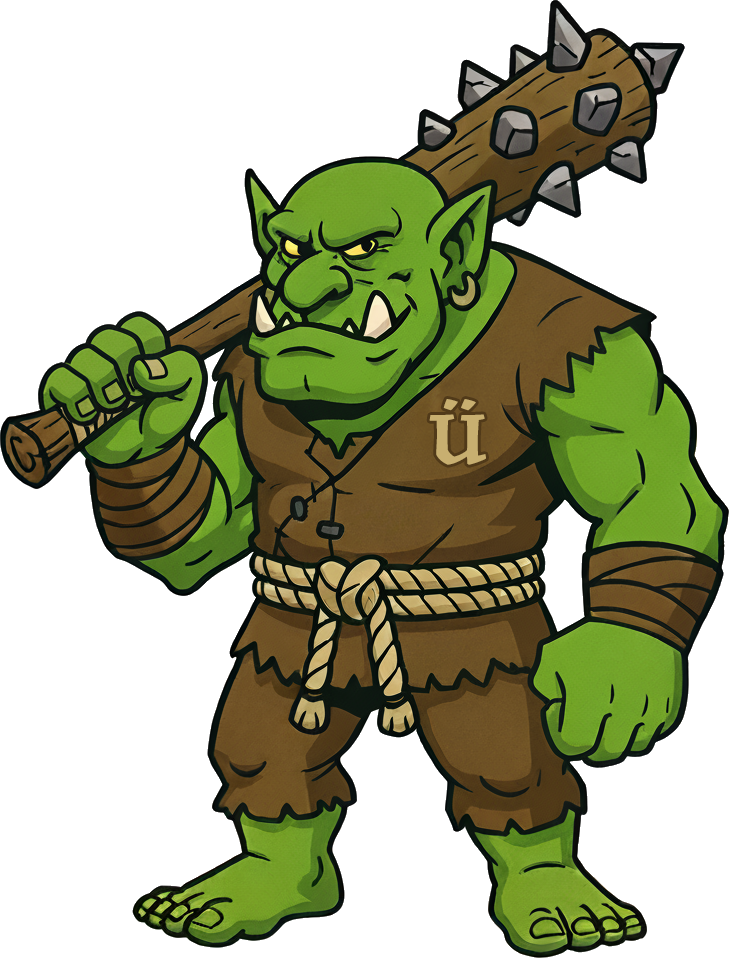
<style>
.page{position:relative;width:729px;height:958px;background:#ffffff}
.page>*{position:absolute;margin:0}
.t1{font:78.4px "Katari-Bold";letter-spacing:0.05em;color:#c8af70;text-transform:uppercase}
</style>
<div class="page">
<p class="t1" style="left:429px;top:399px;width:57px;height:66px">Ü</p>
</div>
